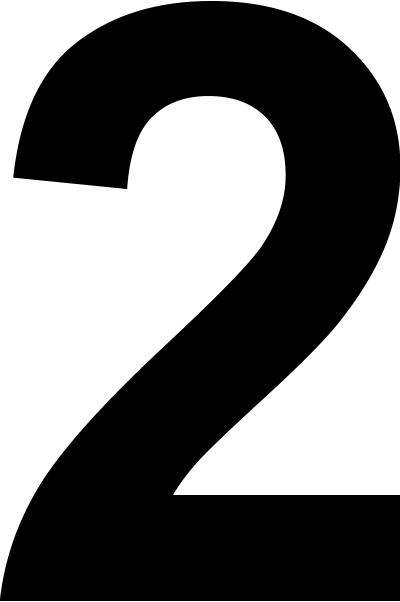
<style>
.page{position:relative;width:400px;height:602px;background:#000000}
.page>*{position:absolute;margin:0}
.t1{font:833.3px "Arial-BoldMT";letter-spacing:0.04em;color:#000000}
</style>
<div class="page">
<p class="t1" style="left:0px;top:1px;width:401px;height:600px">2</p>
</div>
